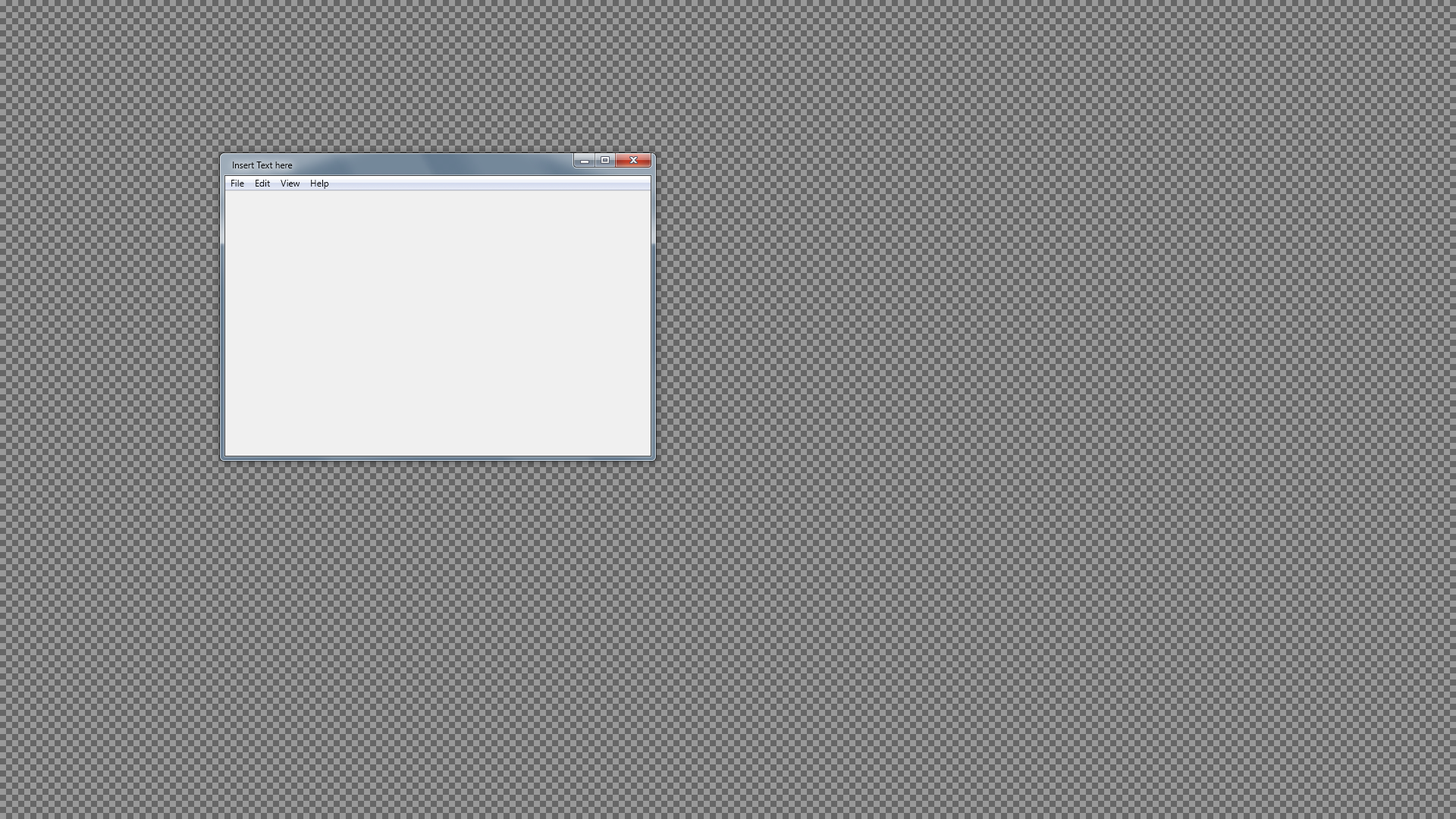
<style>
.page{position:relative;width:1456px;height:819px}
.page>*{position:absolute;margin:0}
.t1{font:9.1px "SegoeUI";letter-spacing:-0.01em;color:#000000}
.t2{font:9.1px "SegoeUI";letter-spacing:0.003em;color:#000000}
</style>
<div class="page">
<p class="t1" style="left:233px;top:162px;width:60px;height:6px">Insert Text here</p>
<p class="t2" style="left:231px;top:180px;width:13px;height:7px">File</p>
<p class="t2" style="left:256px;top:180px;width:14px;height:7px">Edit</p>
<p class="t2" style="left:281px;top:180px;width:19px;height:7px">View</p>
<p class="t2" style="left:311px;top:180px;width:18px;height:9px">Help</p>
</div>
